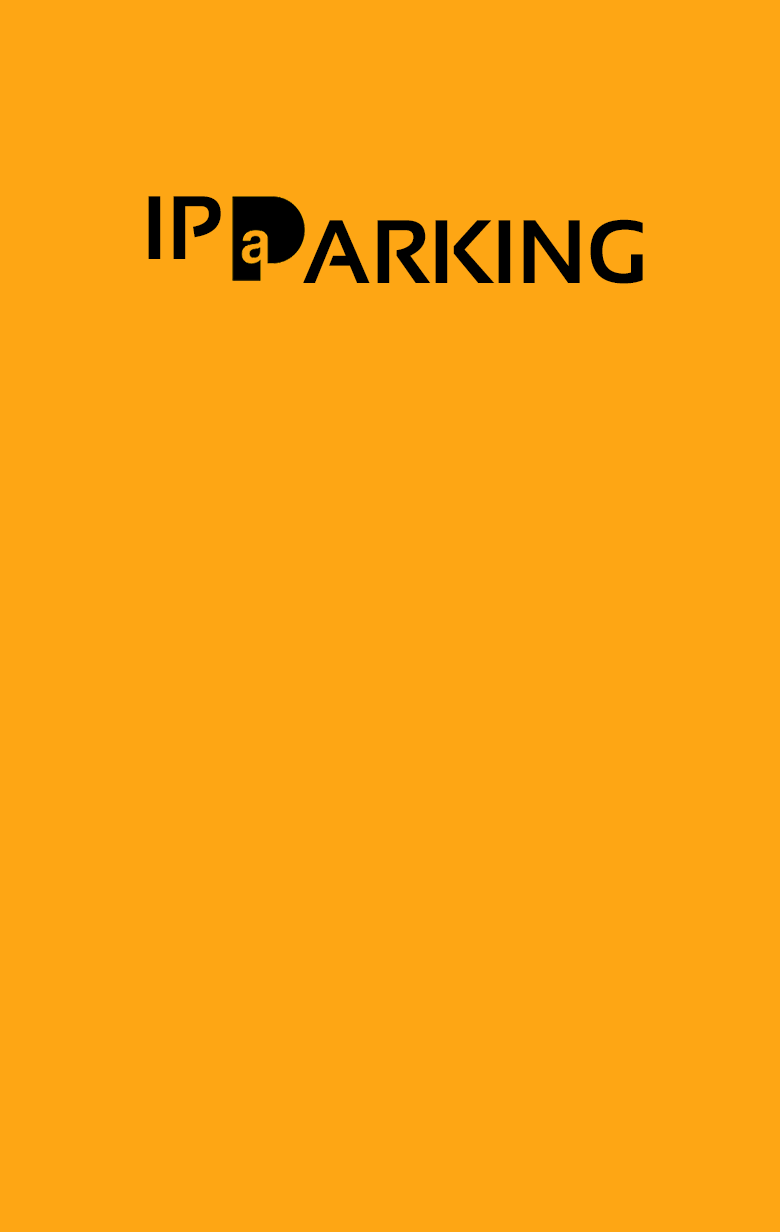
<style>
.page{position:relative;width:780px;height:1232px;background:#fea614}
.page>*{position:absolute;margin:0}
.t1{font:90px "Sansation-Bold";color:#000000}
</style>
<div class="page">
<p class="t1" style="left:148px;top:196px;width:73px;height:63px">IP</p>
<p class="t1" style="left:303px;top:219px;width:340px;height:65px">ARKING</p>
</div>
